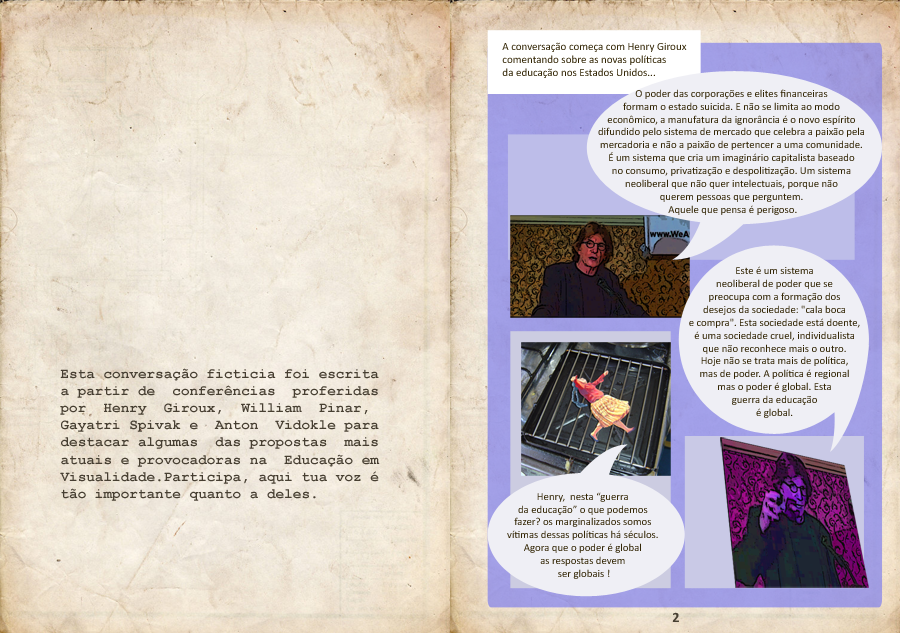
<style>
.page{position:relative;width:900px;height:633px}
.page>*{position:absolute;margin:0}
.t1{font:11px "Calibri";color:#332605}
.t2{font:10.7px "Calibri";color:#332605}
.t3{font:14.3px "CourierNewPS-BoldMT";color:#473f32}
.t4{font:14.3px "Calibri-Bold";color:#473f32}
</style>
<div class="page">
<p class="t1" style="left:502px;top:42px;width:185px;height:36px">A conversação começa com Henry Giroux<br>comentando sobre as novas políticas<br>da educação nos Estados Unidos...</p>
<p class="t2" style="left:598px;top:89px;width:266px;height:126px;text-align:center">O poder das corporações e elites financeiras <br>formam o estado suicida. E não se limita ao modo <br>econômico, a manufatura da ignorância é o novo espírito <br>difundido pelo sistema de mercado que celebra a paixão pela <br>mercadoria e não a paixão de pertencer a uma comunidade. <br>É um sistema que cria um imaginário capitalista baseado <br>no consumo, privatização e despolitização. Um sistema <br>neoliberal que não quer intelectuais, porque não <br>querem pessoas que perguntem. <br>Aquele que pensa é perigoso.</p>
<p class="t2" style="left:689px;top:266px;width:171px;height:152px;text-align:center">Este é um sistema <br>neoliberal de poder que se <br>preocupa com a formação dos <br>desejos da sociedade: "cala boca <br>e compra". Esta sociedade está doente, <br>é uma sociedade cruel, individualista <br>que não reconhece mais o outro. <br>Hoje não se trata mais de política, <br>mas de poder. A política é regional <br>mas o poder é global. Esta <br>guerra da educação <br>é global.</p>
<p class="t3" style="left:60px;top:368px;width:320px;height:133px">Esta conversação ficticia foi escrita<br>a partir de  conferências  proferidas <br>por  Henry  Giroux,  William  Pinar, <br>Gayatri Spivak e  Anton  Vidokle para <br>destacar algumas  das propostas  mais<br>atuais e provocadoras na  Educação em <br>Visualidade.Participa, aqui tua voz é<br>tão importante quanto a deles.</p>
<p class="t2" style="left:507px;top:492px;width:151px;height:87px;text-align:center">Henry,  nesta “guerra <br>da educação” o que podemos <br>fazer? os marginalizados somos <br>vítimas dessas políticas há séculos. <br>Agora que o poder é global <br>as respostas devem <br>ser globais !</p>
<p class="t4" style="left:672px;top:612px;width:7px;height:10px">2</p>
</div>
